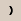
<style>
.page{position:relative;width:21px;height:21px;background:#d9cdc1}
.page>*{position:absolute;margin:0}
.t1{font:9px "Tahoma-Bold";color:#000000}
</style>
<div class="page">
<p class="t1" style="left:9px;top:6px;width:4px;height:9px">)</p>
</div>
